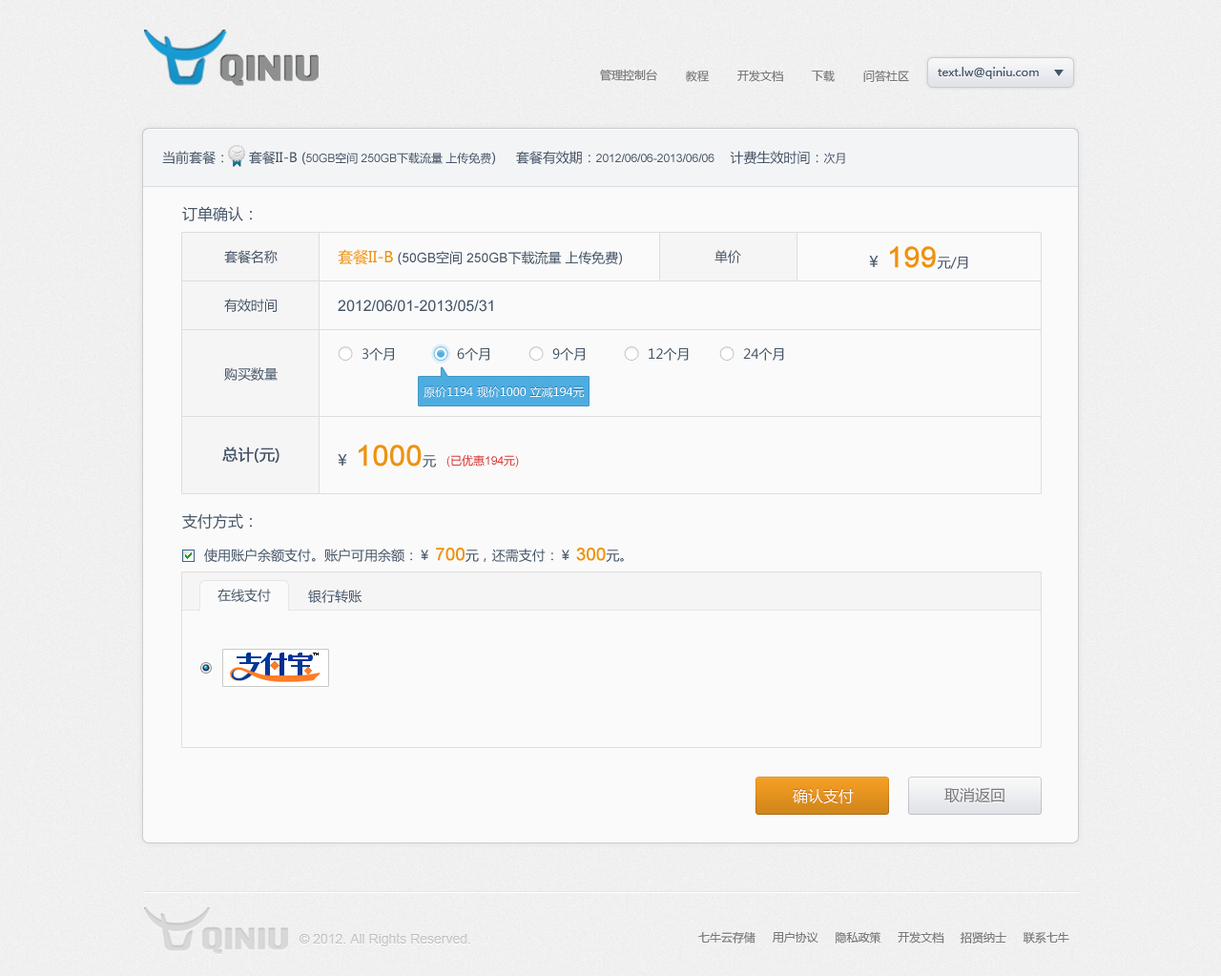
<style>
.page{position:relative;width:1221px;height:976px;background:#fafafa}
.page>*{position:absolute;margin:0}
.t1{font:11.5px "MicrosoftYaHei";color:#787878}
.t2{font:11.5px "MicrosoftYaHei";color:#465567}
.t3{font:11.5px "ArialMT";color:#465567}
.t4{font:13.4px "MicrosoftYaHei";color:#465567}
.t5{font:15.3px "MicrosoftYaHei";color:#465567}
.t6{font:15.3px "MicrosoftYaHei";color:#ee9210}
.t7{font:13.4px "ArialMT";color:#465567}
.t8{font:28.6px "ArialMT";color:#ee9210;font-weight:bold}
.t9{font:15.3px "ArialMT";color:#465567}
.t10{font:11.5px "MicrosoftYaHei";color:#ffffff}
.t11{font:15.3px "MicrosoftYaHei";color:#465567;font-weight:bold}
.t12{font:11.5px "MicrosoftYaHei";color:#d73838}
.t13{font:11.5px "ArialMT";color:#d73838}
.t14{font:17.2px "ArialMT";color:#ee9210;font-weight:bold}
.t15{font:15.3px "MicrosoftYaHei";color:#ffffff}
.t16{font:15.3px "MicrosoftYaHei";color:#787878}
.t17{font:13.4px "ArialMT";color:#c6c6c6}
</style>
<div class="page">
<p class="t1" style="left:600px;top:69px;width:57px;height:12px">管理控制台</p>
<p class="t1" style="left:686px;top:71px;width:24px;height:11px">教程</p>
<p class="t1" style="left:738px;top:70px;width:45px;height:12px">开发文档</p>
<p class="t1" style="left:812px;top:70px;width:23px;height:12px">下载</p>
<p class="t1" style="left:864px;top:70px;width:45px;height:12px">问答社区</p>
<p class="t2" style="left:938px;top:67px;width:101px;height:12px">text.lw@qiniu.com</p>
<p class="t3" style="left:162px;top:151px;width:683px;height:14px"><span class="t4">当前套餐：     套餐II-B (</span>50GB<span class="t2">空间</span> 250GB<span class="t2">下载流量 上传免费</span><span class="t4">)     套餐有效期：</span>2012/06/06-2013/06/06     <span class="t4">计费生效时间：</span><span class="t2">次月</span></p>
<p class="t5" style="left:182px;top:206px;width:70px;height:16px">订单确认：</p>
<p class="t4" style="left:224px;top:250px;width:54px;height:13px">套餐名称</p>
<p class="t4" style="left:338px;top:249px;width:284px;height:16px"><span class="t6">套餐II-B </span>(<span class="t7">50GB</span>空间<span class="t7"> 250GB</span>下载流量 上传免费)</p>
<p class="t4" style="left:715px;top:250px;width:26px;height:13px">单价</p>
<p class="t5" style="left:869px;top:256px;width:10px;height:11px">￥</p>
<p class="t8" style="left:890px;top:246px;width:79px;height:23px">199<span class="t4">元/月</span></p>
<p class="t4" style="left:224px;top:299px;width:53px;height:13px">有效时间</p>
<p class="t9" style="left:338px;top:300px;width:155px;height:12px">2012/06/01-2013/05/31</p>
<p class="t4" style="left:363px;top:347px;width:31px;height:14px">3个月</p>
<p class="t4" style="left:457px;top:347px;width:33px;height:14px">6个月</p>
<p class="t4" style="left:553px;top:347px;width:32px;height:14px">9个月</p>
<p class="t4" style="left:649px;top:347px;width:40px;height:14px">12个月</p>
<p class="t4" style="left:743px;top:347px;width:41px;height:14px">24个月</p>
<p class="t4" style="left:224px;top:367px;width:54px;height:14px">购买数量</p>
<p class="t10" style="left:424px;top:386px;width:161px;height:12px">原价1194 现价1000 立减194元</p>
<p class="t11" style="left:222px;top:447px;width:58px;height:16px">总计(元)</p>
<p class="t8" style="left:359px;top:445px;width:77px;height:23px">1000<span class="t4">元</span></p>
<p class="t5" style="left:338px;top:454px;width:9px;height:12px">￥</p>
<p class="t12" style="left:447px;top:455px;width:72px;height:13px"><span class="t13">(</span>已优惠<span class="t13">194</span>元<span class="t13">)</span></p>
<p class="t5" style="left:182px;top:513px;width:70px;height:17px">支付方式：</p>
<p class="t4" style="left:204px;top:548px;width:420px;height:14px">使用账户余额支付。账户可用余额：￥ <span class="t14">700</span>元，还需支付：￥ <span class="t14">300</span>元。</p>
<p class="t4" style="left:218px;top:589px;width:53px;height:13px">在线支付</p>
<p class="t4" style="left:308px;top:590px;width:55px;height:13px">银行转账</p>
<p class="t15" style="left:793px;top:788px;width:61px;height:16px">确认支付</p>
<p class="t16" style="left:945px;top:787px;width:60px;height:17px">取消返回</p>
<p class="t17" style="left:299px;top:933px;width:171px;height:14px">© 2012. All Rights Reserved.</p>
<p class="t1" style="left:699px;top:931px;width:371px;height:13px">七牛云存储     用户协议     隐私政策     开发文档     招贤纳士     联系七牛</p>
</div>
